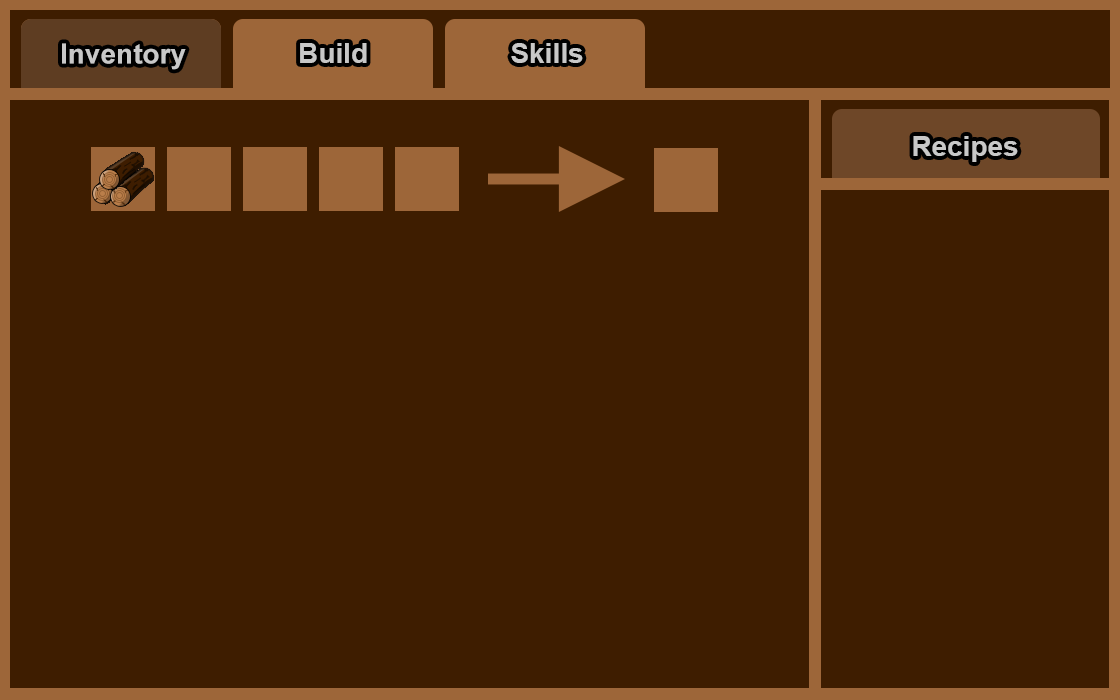
<style>
.page{position:relative;width:1120px;height:700px;background:#3e1d00}
.page>*{position:absolute;margin:0}
.t1{font:28px "Arial-BoldMT";color:#c8c8c8}
.t2{font:28px "Arial-BoldMT";color:#c7c7c7}
</style>
<div class="page">
<p class="t1" style="left:62px;top:43px;width:124px;height:27px">Inventory</p>
<p class="t2" style="left:300px;top:43px;width:67px;height:20px">Build</p>
<p class="t1" style="left:511px;top:43px;width:72px;height:20px">Skills</p>
<p class="t1" style="left:913px;top:136px;width:105px;height:26px">Recipes</p>
</div>
